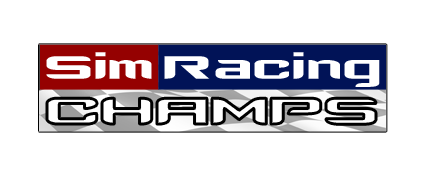
<style>
.page{position:relative;width:422px;height:175px;background:#ffffff}
.page>*{position:absolute;margin:0}
.t1{font:72px "CloneWars";color:#ffffff}
</style>
<div class="page">
<p class="t1" style="left:46px;top:52px;width:106px;height:27px">Sim</p>
<p class="t1" style="left:164px;top:52px;width:216px;height:35px">Racing</p>
</div>
